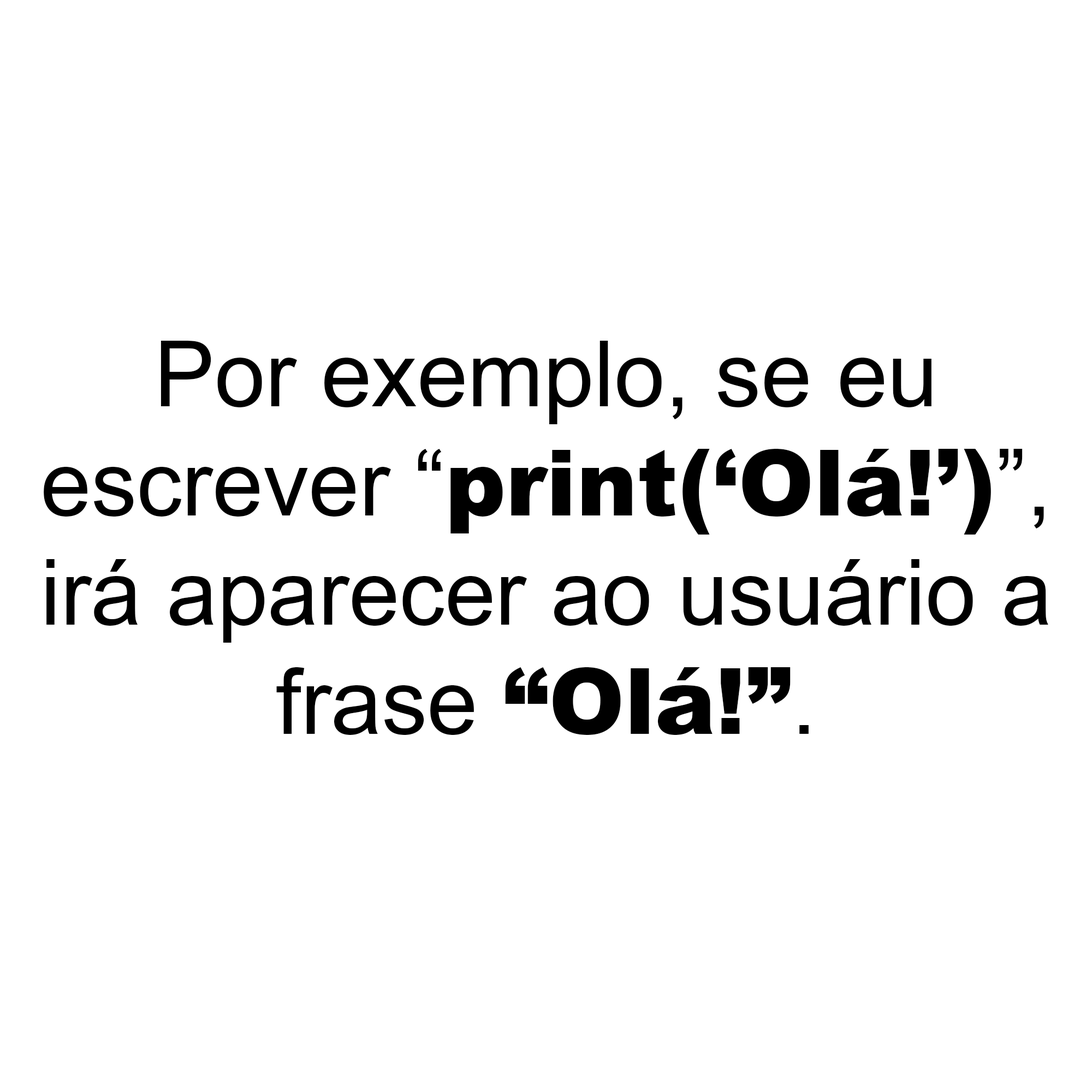
<style>
.page{position:relative;width:1092px;height:1092px;background:#ffffff}
.page>*{position:absolute;margin:0}
.t1{font:91px "ArialMT";color:#000000}
.t2{font:91px "Arial-Black";color:#000000}
</style>
<div class="page">
<p class="t1" style="left:44px;top:341px;width:1004px;height:394px;text-align:center">Por exemplo, se eu<br>escrever “<span class="t2">print(‘Olá!’)</span>”,<br>irá aparecer ao usuário a<br>frase <span class="t2">“Olá!”</span>.</p>
</div>
